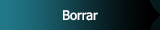
<style>
.page{position:relative;width:160px;height:30px}
.page>*{position:absolute;margin:0}
.t1{font:13px "Tahoma";color:#ffffff}
</style>
<div class="page">
<p class="t1" style="left:63px;top:10px;width:35px;height:11px">Borrar</p>
</div>
